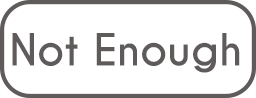
<style>
.page{position:relative;width:256px;height:98px;background:#ffffff}
.page>*{position:absolute;margin:0}
.t1{font:41.7px "CaviarDreams-Bold";color:#5f5b5b}
</style>
<div class="page">
<p class="t1" style="left:12px;top:33px;width:228px;height:40px">Not Enough</p>
</div>
